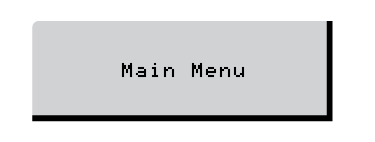
<style>
.page{position:relative;width:375px;height:142px;background:#d1d2d4}
.page>*{position:absolute;margin:0}
.t1{font:16px "Mono0756";color:#000000}
</style>
<div class="page">
<p class="t1" style="left:121px;top:62px;width:124px;height:16px">Main Menu</p>
</div>
